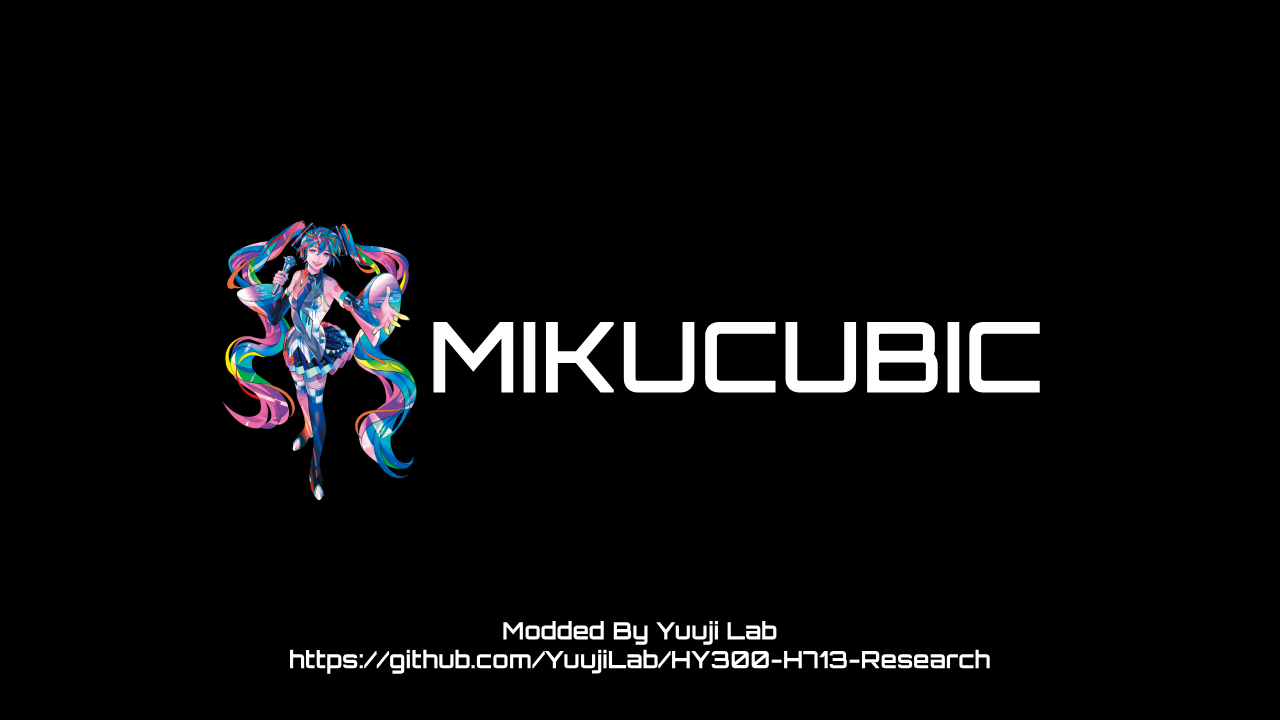
<style>
.page{position:relative;width:1280px;height:720px;background:#000000}
.page>*{position:absolute;margin:0}
.t1{font:98px "Orbitron-SemiBold";color:#ffffff}
.t2{font:24px "Orbitron-Bold";color:#ffffff}
</style>
<div class="page">
<p class="t1" style="left:433px;top:321px;width:607px;height:72px">MIKUCUBIC</p>
<p class="t2" style="left:290px;top:621px;width:700px;height:53px;text-align:center">Modded By Yuuji Lab<br>https://github.com/YuujiLab/HY300-H713-Research</p>
</div>
